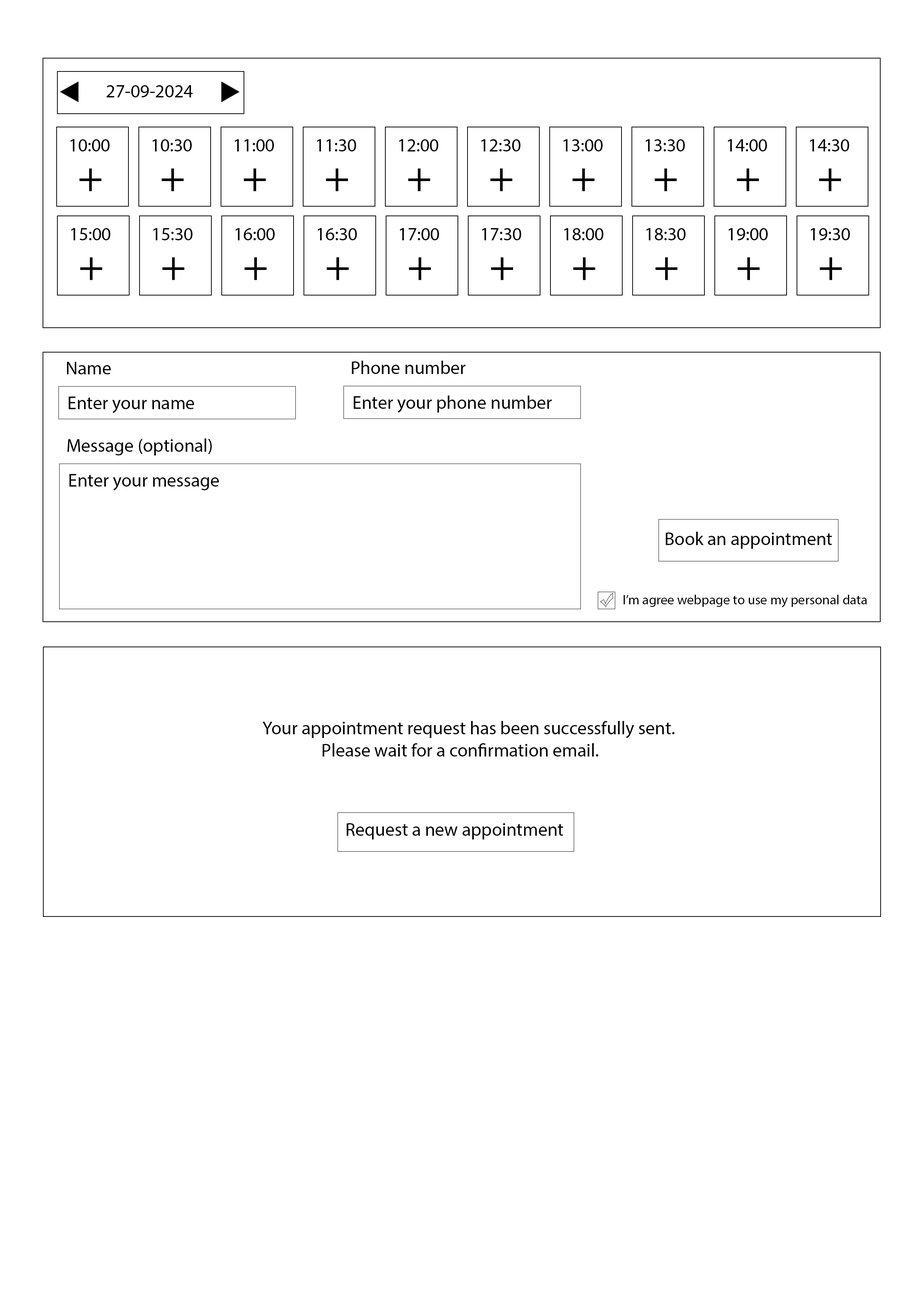
<style>
.page{position:relative;width:918px;height:1299px;background:#ffffff}
.page>*{position:absolute;margin:0}
.t1{font:18.5px "MyriadPro-Regular";color:#000000}
.t2{font:42.6px "MyriadPro-Regular";color:#000000}
.t3{font:13.6px "MyriadPro-Regular";color:#000000}
</style>
<div class="page">
<p class="t1" style="left:107px;top:85px;width:86px;height:12px">27-09-2024</p>
<p class="t1" style="left:70px;top:139px;width:40px;height:12px">10:00</p>
<p class="t1" style="left:153px;top:139px;width:39px;height:12px">10:30</p>
<p class="t1" style="left:235px;top:139px;width:39px;height:12px">11:00</p>
<p class="t1" style="left:317px;top:139px;width:39px;height:12px">11:30</p>
<p class="t1" style="left:399px;top:139px;width:39px;height:12px">12:00</p>
<p class="t1" style="left:481px;top:139px;width:40px;height:12px">12:30</p>
<p class="t1" style="left:563px;top:139px;width:40px;height:12px">13:00</p>
<p class="t1" style="left:646px;top:139px;width:39px;height:12px">13:30</p>
<p class="t1" style="left:728px;top:139px;width:39px;height:12px">14:00</p>
<p class="t1" style="left:810px;top:139px;width:39px;height:12px">14:30</p>
<p class="t2" style="left:79px;top:168px;width:23px;height:23px">+</p>
<p class="t2" style="left:161px;top:168px;width:23px;height:23px">+</p>
<p class="t2" style="left:244px;top:168px;width:22px;height:23px">+</p>
<p class="t2" style="left:326px;top:168px;width:22px;height:23px">+</p>
<p class="t2" style="left:408px;top:168px;width:23px;height:23px">+</p>
<p class="t2" style="left:490px;top:168px;width:23px;height:23px">+</p>
<p class="t2" style="left:572px;top:168px;width:23px;height:23px">+</p>
<p class="t2" style="left:655px;top:168px;width:22px;height:23px">+</p>
<p class="t2" style="left:737px;top:168px;width:22px;height:23px">+</p>
<p class="t2" style="left:819px;top:168px;width:23px;height:23px">+</p>
<p class="t1" style="left:71px;top:228px;width:39px;height:12px">15:00</p>
<p class="t1" style="left:153px;top:228px;width:40px;height:12px">15:30</p>
<p class="t1" style="left:235px;top:228px;width:40px;height:12px">16:00</p>
<p class="t1" style="left:318px;top:228px;width:39px;height:12px">16:30</p>
<p class="t1" style="left:400px;top:228px;width:39px;height:12px">17:00</p>
<p class="t1" style="left:482px;top:228px;width:39px;height:12px">17:30</p>
<p class="t1" style="left:564px;top:228px;width:39px;height:12px">18:00</p>
<p class="t1" style="left:646px;top:228px;width:40px;height:12px">18:30</p>
<p class="t1" style="left:729px;top:228px;width:39px;height:12px">19:00</p>
<p class="t1" style="left:811px;top:228px;width:39px;height:12px">19:30</p>
<p class="t2" style="left:80px;top:257px;width:23px;height:23px">+</p>
<p class="t2" style="left:162px;top:257px;width:23px;height:23px">+</p>
<p class="t2" style="left:244px;top:257px;width:23px;height:23px">+</p>
<p class="t2" style="left:327px;top:257px;width:22px;height:23px">+</p>
<p class="t2" style="left:409px;top:257px;width:22px;height:23px">+</p>
<p class="t2" style="left:491px;top:257px;width:22px;height:23px">+</p>
<p class="t2" style="left:573px;top:257px;width:23px;height:23px">+</p>
<p class="t2" style="left:655px;top:257px;width:23px;height:23px">+</p>
<p class="t2" style="left:737px;top:257px;width:23px;height:23px">+</p>
<p class="t2" style="left:820px;top:257px;width:22px;height:23px">+</p>
<p class="t1" style="left:67px;top:362px;width:44px;height:12px">Name</p>
<p class="t1" style="left:352px;top:361px;width:114px;height:13px">Phone number</p>
<p class="t1" style="left:68px;top:397px;width:126px;height:16px">Enter your name</p>
<p class="t1" style="left:354px;top:395px;width:198px;height:18px">Enter your phone number</p>
<p class="t1" style="left:67px;top:438px;width:145px;height:17px">Message (optional)</p>
<p class="t1" style="left:69px;top:474px;width:150px;height:17px">Enter your message</p>
<p class="t1" style="left:666px;top:532px;width:166px;height:17px">Book an appointment</p>
<p class="t3" style="left:623px;top:595px;width:244px;height:12px">I’m agree webpage to use my personal data</p>
<p class="t1" style="left:262px;top:721px;width:413px;height:35px">Your appointment request has been successfully sent. <br>               Please wait for a confirmation email.</p>
<p class="t1" style="left:347px;top:823px;width:216px;height:16px">Request a new appointment</p>
</div>
